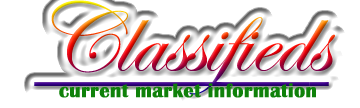
<style>
.page{position:relative;width:360px;height:108px;background:#ffffff}
.page>*{position:absolute;margin:0}
.t1{font:100px "EdwardianScriptITC";text-decoration:underline}
.t2{font:20px "BritannicBold";color:#0f810a;font-weight:bold}
</style>
<div class="page">
<p class="t1" style="left:34px;top:0px;width:301px;height:95px">Classifieds</p>
<p class="t2" style="left:59px;top:83px;width:257px;height:15px">current market information</p>
</div>
